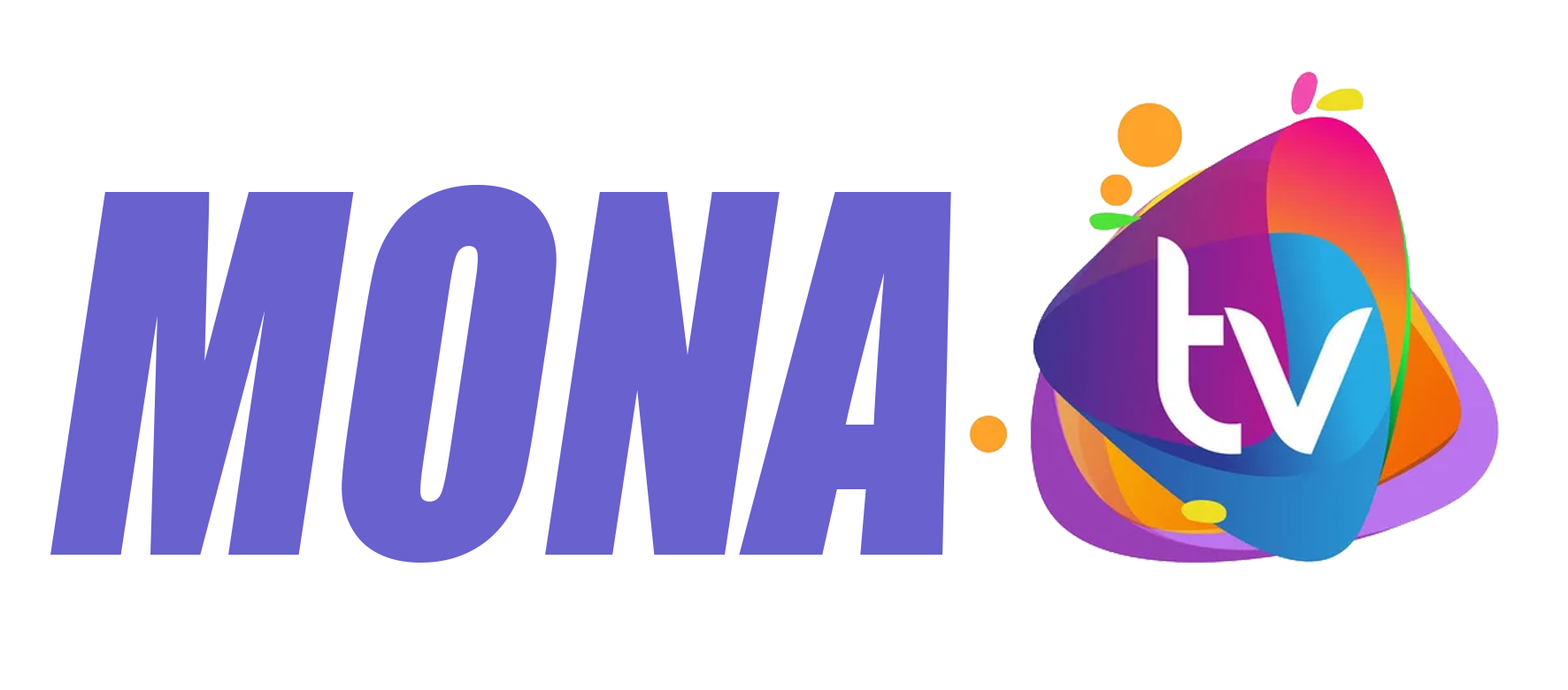
<style>
.page{position:relative;width:1568px;height:690px;background:#ffffff}
.page>*{position:absolute;margin:0}
.t1{font:457.9px "Impact";color:#6861ce;font-style:italic;scale:0.86 1}
</style>
<div class="page">
<p class="t1" style="left:50px;top:185px;width:901px;height:378px">MONA</p>
</div>
